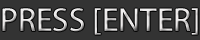
<style>
.page{position:relative;width:200px;height:40px;background:#333333}
.page>*{position:absolute;margin:0}
.t1{font:33.3px "MyriadPro-Regular";color:#ebe9e9}
</style>
<div class="page">
<p class="t1" style="left:2px;top:8px;width:196px;height:27px">PRESS [ENTER]</p>
</div>
